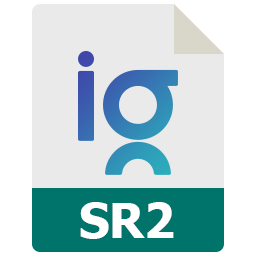
<style>
.page{position:relative;width:256px;height:256px;background:#eaeaea}
.page>*{position:absolute;margin:0}
.t1{font:48px "Tahoma-Bold";color:#ffffff}
</style>
<div class="page">
<p class="t1" style="left:80px;top:202px;width:94px;height:37px">SR2</p>
</div>
